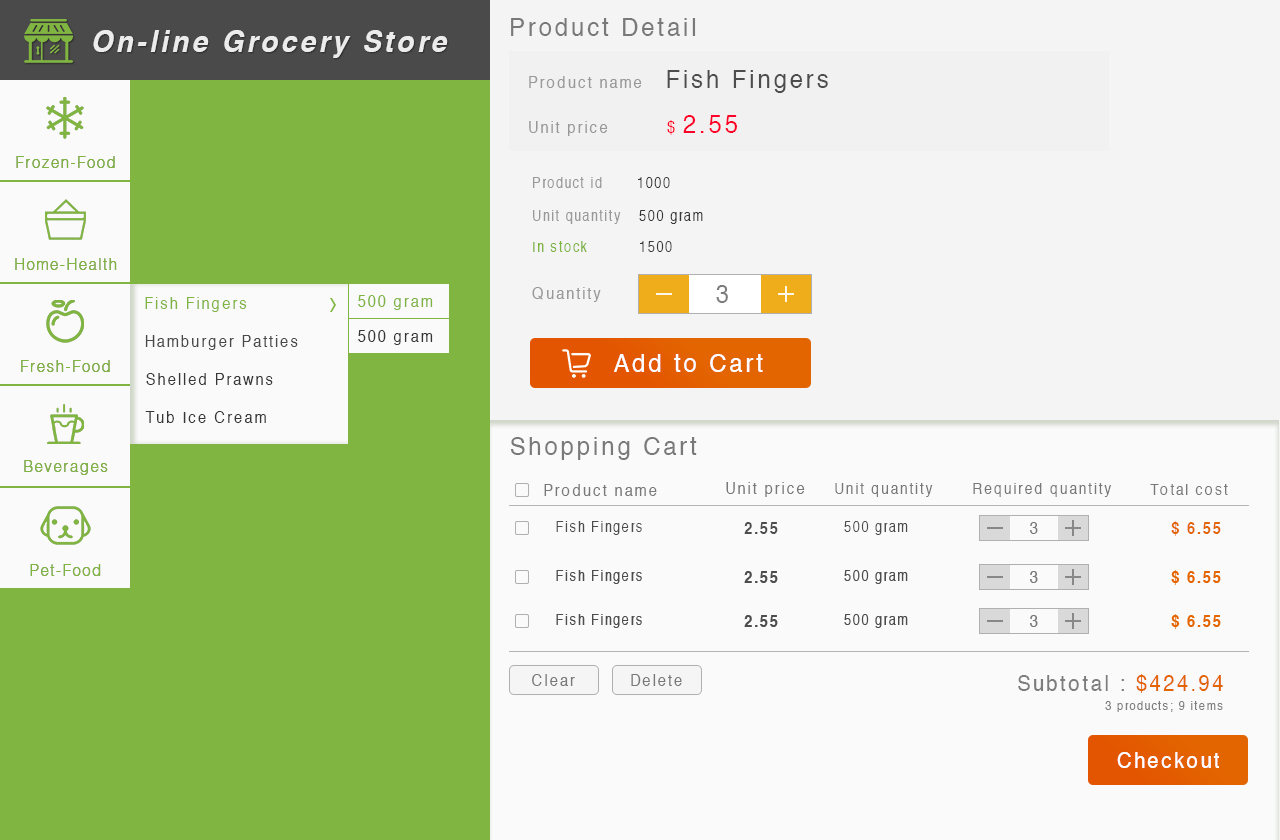
<style>
.page{position:relative;width:1280px;height:840px;background:#fafafa}
.page>*{position:absolute;margin:0}
.t1{font:30px "Helvetica-BoldOblique";letter-spacing:0.12em;color:#ececec;scale:0.92 1}
.t2{font:26px "Helvetica";letter-spacing:0.12em;color:#797979;scale:0.92 1}
.t3{font:16px "Helvetica";letter-spacing:0.12em;color:#999999;scale:0.92 1}
.t4{font:26px "Helvetica";letter-spacing:0.12em;color:#4d4d4d;scale:0.92 1}
.t5{font:26px "Helvetica";letter-spacing:0.12em;color:#ff002b;scale:0.92 1}
.t6{font:16px "Helvetica";letter-spacing:0.12em;color:#ff002b;scale:0.92 1}
.t7{font:16px "Helvetica-Light";letter-spacing:0.12em;color:#81b542;scale:0.92 1}
.t8{font:14px "Helvetica";letter-spacing:0.12em;color:#999999;scale:0.92 1}
.t9{font:14px "Helvetica";letter-spacing:0.12em;color:#383838;scale:0.92 1}
.t10{font:14px "Helvetica";letter-spacing:0.12em;color:#81b542;scale:0.92 1}
.t11{font:25px "Helvetica";letter-spacing:0.12em;color:#7c7c7c;scale:0.92 1}
.t12{font:16px "Helvetica";letter-spacing:0.12em;color:#81b542;scale:0.92 1}
.t13{font:16px "Helvetica";letter-spacing:0.12em;color:#484848;scale:0.92 1}
.t14{font:16px "Helvetica";letter-spacing:0.12em;color:#373737;scale:0.92 1}
.t15{font:26px "Helvetica";letter-spacing:0.12em;color:#ffffff;scale:0.92 1}
.t16{font:16px "Helvetica";letter-spacing:0.12em;color:#797979;scale:0.92 1}
.t17{font:15px "Helvetica";letter-spacing:0.12em;color:#797979;scale:0.92 1}
.t18{font:14px "Helvetica";letter-spacing:0.12em;color:#4d4d4d;scale:0.92 1}
.t19{font:16px "Helvetica-Bold";letter-spacing:0.12em;color:#e36500;scale:0.92 1}
.t20{font:16px "Helvetica-Bold";letter-spacing:0.12em;color:#4d4d4d;scale:0.92 1}
.t21{font:22px "Helvetica";letter-spacing:0.12em;color:#7d7d7d;scale:0.92 1}
.t22{font:22px "Helvetica";letter-spacing:0.12em;color:#e36500;scale:0.92 1}
.t23{font:12px "Helvetica";letter-spacing:0.12em;color:#7d7d7d;scale:0.92 1}
.t24{font:22px "Helvetica";letter-spacing:0.12em;color:#ffffff;scale:0.92 1}
</style>
<div class="page">
<p class="t1" style="left:93px;top:30px;width:355px;height:28px">On-line Grocery Store</p>
<p class="t2" style="left:511px;top:18px;width:185px;height:18px">Product Detail</p>
<p class="t3" style="left:529px;top:76px;width:113px;height:12px">Product name</p>
<p class="t4" style="left:667px;top:70px;width:161px;height:23px">Fish Fingers</p>
<p class="t3" style="left:529px;top:121px;width:79px;height:15px">Unit price</p>
<p class="t5" style="left:667px;top:115px;width:71px;height:20px"><span class="t6">$ </span>2.55</p>
<p class="t7" style="left:16px;top:156px;width:99px;height:12px">Frozen-Food</p>
<p class="t8" style="left:533px;top:177px;width:69px;height:11px">Product id</p>
<p class="t9" style="left:638px;top:177px;width:32px;height:11px">1000</p>
<p class="t8" style="left:533px;top:210px;width:88px;height:14px">Unit quantity</p>
<p class="t9" style="left:639px;top:210px;width:64px;height:14px">500 gram</p>
<p class="t10" style="left:533px;top:241px;width:54px;height:11px">In stock</p>
<p class="t9" style="left:640px;top:241px;width:32px;height:11px">1500</p>
<p class="t7" style="left:15px;top:258px;width:102px;height:12px">Home-Health</p>
<p class="t3" style="left:532px;top:287px;width:69px;height:15px">Quantity</p>
<p class="t11" style="left:716px;top:285px;width:12px;height:18px">3</p>
<p class="t12" style="left:145px;top:297px;width:102px;height:15px">Fish Fingers</p>
<p class="t12" style="left:358px;top:295px;width:75px;height:15px">500 gram</p>
<p class="t13" style="left:145px;top:335px;width:153px;height:15px">Hamburger Patties</p>
<p class="t14" style="left:358px;top:330px;width:75px;height:15px">500 gram</p>
<p class="t7" style="left:21px;top:360px;width:89px;height:12px">Fresh-Food</p>
<p class="t15" style="left:614px;top:354px;width:149px;height:18px">Add to Cart</p>
<p class="t14" style="left:146px;top:373px;width:127px;height:12px">Shelled Prawns</p>
<p class="t14" style="left:145px;top:411px;width:121px;height:12px">Tub Ice Cream</p>
<p class="t2" style="left:510px;top:437px;width:187px;height:23px">Shopping Cart</p>
<p class="t7" style="left:24px;top:460px;width:84px;height:15px">Beverages</p>
<p class="t16" style="left:544px;top:484px;width:113px;height:12px">Product name</p>
<p class="t16" style="left:726px;top:482px;width:79px;height:15px">Unit price</p>
<p class="t17" style="left:835px;top:483px;width:98px;height:14px">Unit quantity</p>
<p class="t17" style="left:973px;top:483px;width:138px;height:14px">Required quantity</p>
<p class="t17" style="left:1150px;top:484px;width:78px;height:11px">Total cost</p>
<p class="t18" style="left:556px;top:521px;width:86px;height:14px">Fish Fingers</p>
<p class="t18" style="left:844px;top:521px;width:64px;height:14px">500 gram</p>
<p class="t19" style="left:1171px;top:521px;width:50px;height:15px">$ 6.55</p>
<p class="t20" style="left:744px;top:522px;width:34px;height:12px">2.55</p>
<p class="t16" style="left:1030px;top:522px;width:8px;height:12px">3</p>
<p class="t7" style="left:30px;top:564px;width:71px;height:12px">Pet-Food</p>
<p class="t16" style="left:532px;top:674px;width:43px;height:12px">Clear</p>
<p class="t16" style="left:631px;top:674px;width:51px;height:12px">Delete</p>
<p class="t21" style="left:1018px;top:674px;width:205px;height:19px">Subtotal :<span class="t22"> $424.94</span></p>
<p class="t23" style="left:1105px;top:701px;width:118px;height:11px">3 products; 9 items</p>
<p class="t24" style="left:1117px;top:752px;width:102px;height:16px">Checkout</p>
</div>
